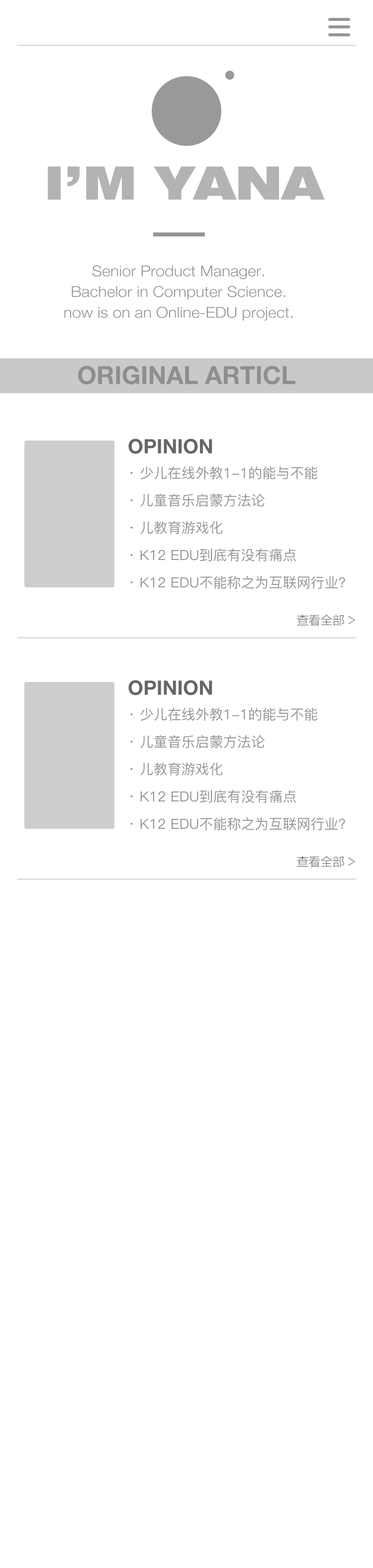
<style>
.page{position:relative;width:373px;height:1568px;background:#ffffff}
.page>*{position:absolute;margin:0}
.t1{font:46.3px "HelveticaNeueLTPro-BlkEx";color:#b3b3b3}
.t2{font:14.9px/20.7px "HelveticaNeue-Light";color:#959595;scale:1.08 1}
.t3{font:24.9px "HelveticaNeue-Bold";color:#8f8e8e;text-transform:uppercase}
.t4{font:19.9px "HelveticaNeue-Bold";color:#666666;text-transform:uppercase}
.t5{font:13.9px/27.4px "PingFang-SC-Medium";color:#959595;text-transform:uppercase}
.t6{font:11.9px "FZLTXHK--GBK1-0";color:#666666;text-transform:uppercase}
</style>
<div class="page">
<p class="t1" style="left:48px;top:166px;width:277px;height:34px">I’M YANA</p>
<p class="t2" style="left:64px;top:265px;width:229px;height:56px;text-align:center">Senior Product Manager.<br>Bachelor in Computer Science.<br>now is on an Online-EDU project.</p>
<p class="t3" style="left:78px;top:366px;width:218px;height:19px">Original Articl</p>
<p class="t4" style="left:128px;top:439px;width:85px;height:15px">OPINION</p>
<p class="t5" style="left:130px;top:466px;width:215px;height:123px">· 少儿在线外教1-1的能与不能 <br>· 儿童音乐启蒙方法论 <br>· 儿教育游戏化<br>· K12 EDU到底有没有痛点<br>· K12 EDU不能称之为互联网行业？</p>
<p class="t6" style="left:297px;top:614px;width:58px;height:12px">查看全部 &gt;</p>
<p class="t4" style="left:128px;top:680px;width:85px;height:15px">OPINION</p>
<p class="t5" style="left:130px;top:708px;width:215px;height:122px">· 少儿在线外教1-1的能与不能 <br>· 儿童音乐启蒙方法论 <br>· 儿教育游戏化<br>· K12 EDU到底有没有痛点<br>· K12 EDU不能称之为互联网行业？</p>
<p class="t6" style="left:297px;top:856px;width:58px;height:11px">查看全部 &gt;</p>
</div>
